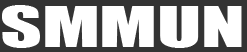
<style>
.page{position:relative;width:247px;height:52px;background:#ffffff}
.page>*{position:absolute;margin:0}
.t1{font:52.2px "Impact";color:#ffffff;scale:1.54 1}
</style>
<div class="page">
<p class="t1" style="left:2px;top:5px;width:240px;height:43px">SMMUN</p>
</div>
